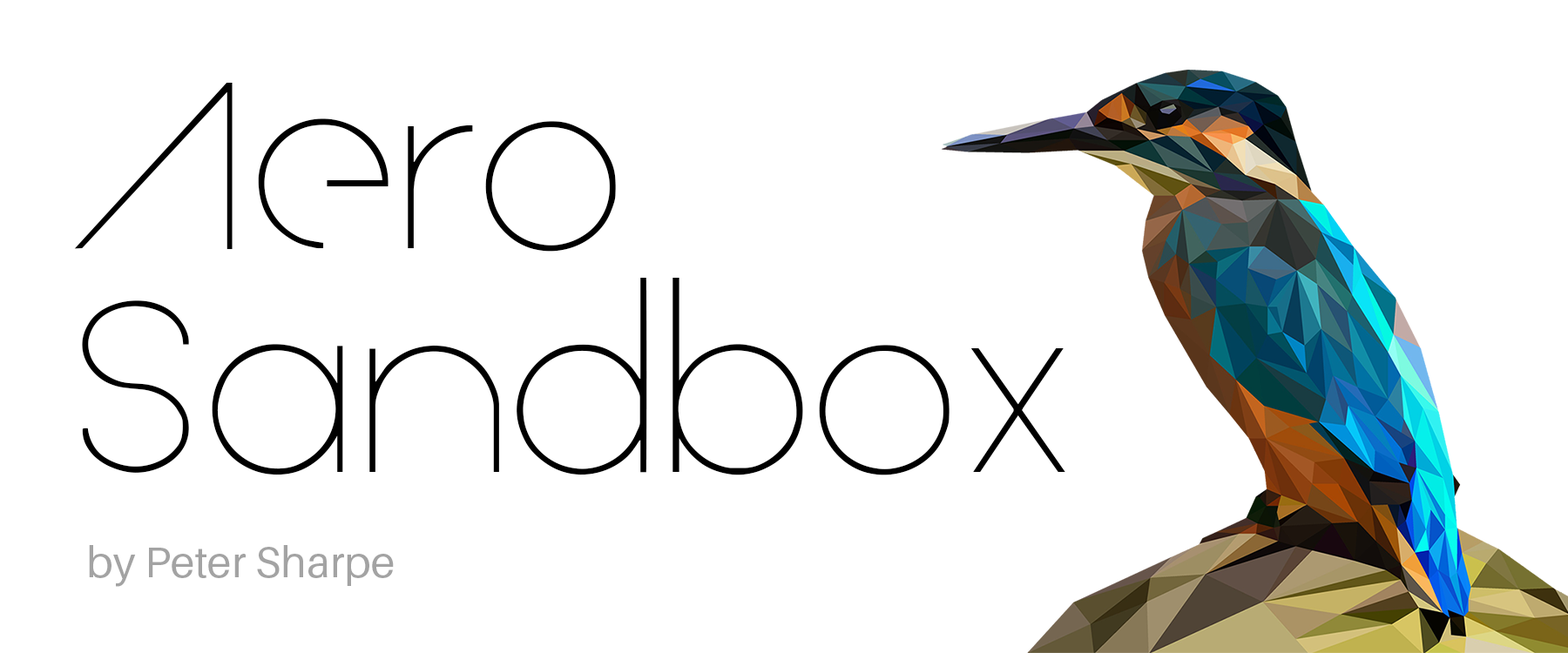
<style>
.page{position:relative;width:1568px;height:653px;background:#ffffff}
.page>*{position:absolute;margin:0}
.t1{font:232.3px "Arual";color:#000000}
.t2{font:43.6px "Aileron-Regular";color:#a3a3a3}
</style>
<div class="page">
<p class="t1" style="left:74px;top:83px;width:991px;height:393px">Aero<br>Sandbox</p>
<p class="t2" style="left:89px;top:545px;width:305px;height:42px">by Peter Sharpe</p>
</div>
